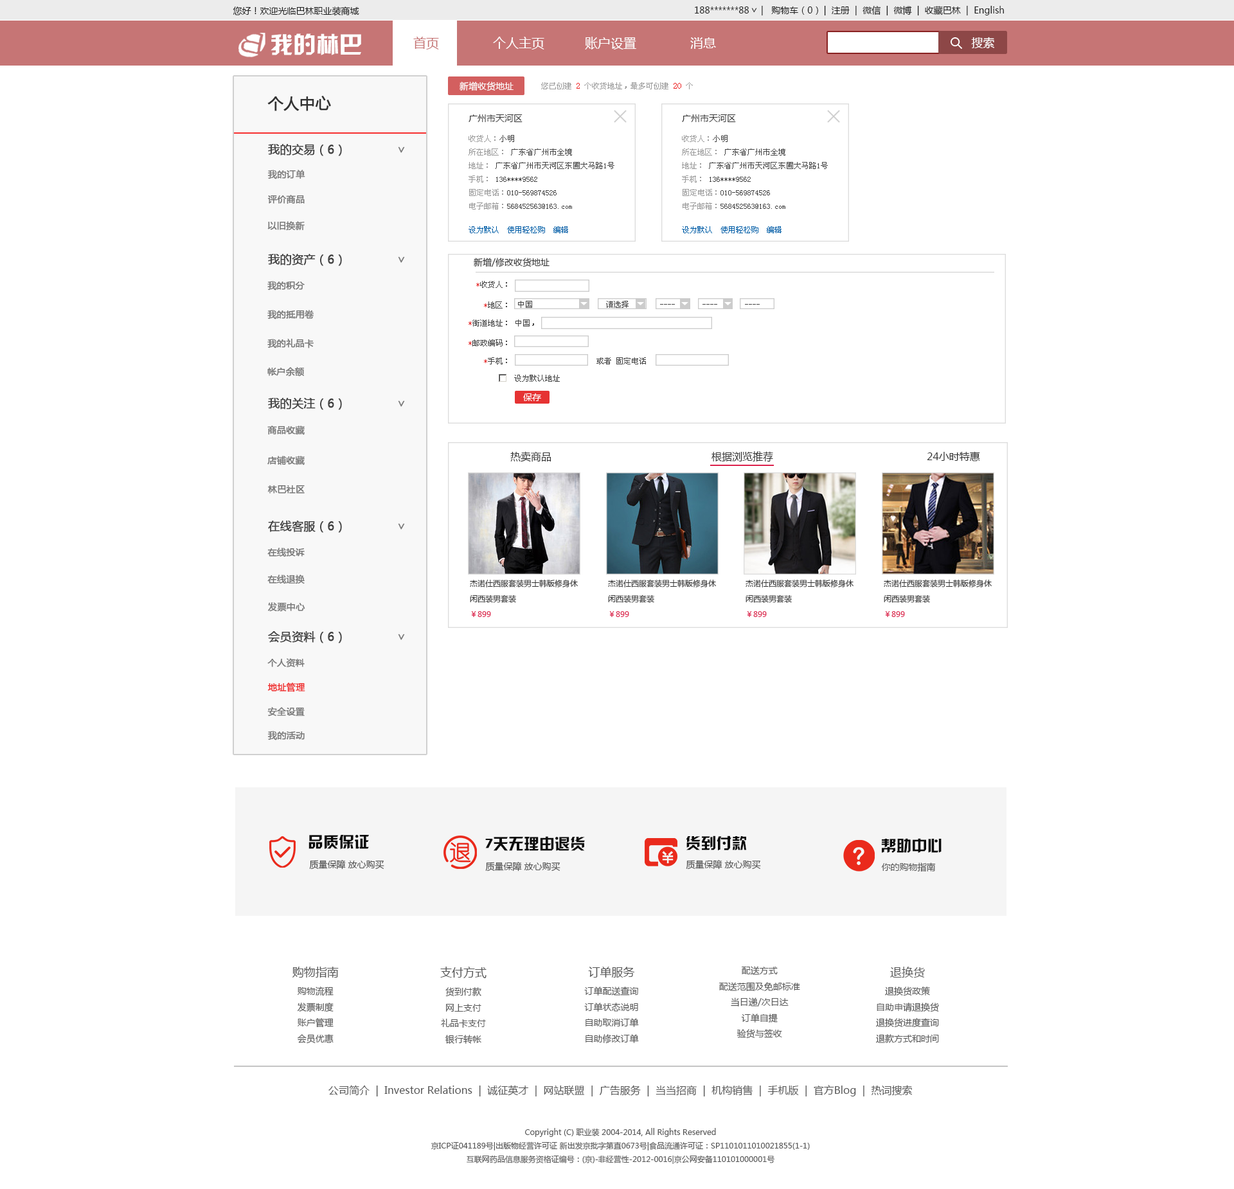
<style>
.page{position:relative;width:1234px;height:1189px;background:#ffffff}
.page>*{position:absolute;margin:0}
.t1{font:9px "MicrosoftYaHei";color:#1e1e1e}
.t2{font:9.2px "MicrosoftYaHei";scale:0.94 1}
.t3{font:23.1px "HYk2gj";color:#ffffff}
.t4{font:12.9px "MicrosoftYaHei";color:#c67575}
.t5{font:12.9px "MicrosoftYaHei";color:#ffffff}
.t6{font:11.6px "MicrosoftYaHei";color:#ffffff}
.t7{font:9px "MicrosoftYaHei";color:#ffffff}
.t8{font:7.7px "SimSun";color:#999999}
.t9{font:9px "SimSun";color:#ee2121}
.t10{font:9px "SimSun";color:#ec1e1e}
.t11{font:15.4px "MicrosoftYaHei";color:#323232;font-weight:bold}
.t12{font:9px "MicrosoftYaHei";color:#333333}
.t13{font:7.7px "SimSun";color:#444444}
.t14{font:11.6px "MicrosoftYaHei";color:#434343;font-weight:bold}
.t15{font:11.6px "MicrosoftYaHei";color:#787878;font-weight:bold}
.t16{font:9px "MicrosoftYaHei";color:#7b7a7a;font-weight:bold}
.t17{font:9px "MicrosoftYaHei";color:#787878;font-weight:bold}
.t18{font:7.7px "SimSun";color:#005ea7}
.t19{font:7.7px "SimSun";color:#e63333}
.t20{font:10.3px "MicrosoftYaHei";color:#333333}
.t21{font:7.7px/15.4px "MicrosoftYaHei";color:#333333}
.t22{font:7.7px/15.4px "MicrosoftYaHei";color:#dc214c}
.t23{font:9px "MicrosoftYaHei";color:#ef2e2e;font-weight:bold}
.t24{font:15.4px "HYk2gj";color:#080808}
.t25{font:15.4px "HYk2gj";color:#0d0d0d}
.t26{font:15.4px "HYk2gj";color:#090909}
.t27{font:15.4px "HYk2gj";color:#0b0b0b}
.t28{font:9px "MicrosoftYaHei";color:#4c4c4c}
.t29{font:9px "MicrosoftYaHei";color:#4e4e4e}
.t30{font:9px "MicrosoftYaHei";color:#505050}
.t31{font:9px "MicrosoftYaHei";color:#575757}
.t32{font:11.6px "MicrosoftYaHei";color:#575757}
.t33{font:10.3px "MicrosoftYaHei";color:#575757}
.t34{font:7.7px "MicrosoftYaHei";color:#575757}
</style>
<div class="page">
<p class="t1" style="left:695px;top:6px;width:309px;height:9px">188*******88                            |  注册  |  微信  |  微博  |  收藏巴林  |  English</p>
<p class="t1" style="left:762px;top:6px;width:56px;height:9px">|   购物车（0）</p>
<p class="t1" style="left:233px;top:6px;width:126px;height:10px">您好！欢迎光临巴林职业装商城</p>
<p class="t2" style="left:752px;top:8px;width:5px;height:5px;rotate:90deg">&gt;</p>
<p class="t3" style="left:271px;top:33px;width:90px;height:22px">我的林巴</p>
<p class="t4" style="left:413px;top:37px;width:26px;height:13px">首页</p>
<p class="t5" style="left:493px;top:37px;width:51px;height:13px">个人主页</p>
<p class="t5" style="left:585px;top:37px;width:51px;height:13px">账户设置</p>
<p class="t5" style="left:690px;top:37px;width:26px;height:12px">消息</p>
<p class="t6" style="left:971px;top:37px;width:24px;height:12px">搜索</p>
<p class="t7" style="left:460px;top:82px;width:54px;height:9px">新增收货地址</p>
<p class="t8" style="left:541px;top:82px;width:152px;height:7px">您已创建 <span class="t9">2 </span>个收货地址，最多可创建 <span class="t10">20 </span>个</p>
<p class="t11" style="left:267px;top:96px;width:64px;height:15px">个人中心</p>
<p class="t12" style="left:469px;top:114px;width:54px;height:8px">广州市天河区</p>
<p class="t12" style="left:682px;top:114px;width:54px;height:8px">广州市天河区</p>
<p class="t13" style="left:469px;top:135px;width:146px;height:75px"><span class="t8">收货人：</span>小明<br><span class="t8">所在地区： </span>广东省广州市全境<br><span class="t8">地址： </span>广东省广州市天河区东圃大马路1号<br><span class="t8">手机：</span> 136****9562<br><span class="t8">固定电话：</span>010-569874526<br><span class="t8">电子邮箱：</span>568452563@163.com</p>
<p class="t13" style="left:682px;top:135px;width:146px;height:75px"><span class="t8">收货人：</span>小明<br><span class="t8">所在地区： </span>广东省广州市全境<br><span class="t8">地址： </span>广东省广州市天河区东圃大马路1号<br><span class="t8">手机：</span> 136****9562<br><span class="t8">固定电话：</span>010-569874526<br><span class="t8">电子邮箱：</span>568452563@163.com</p>
<p class="t14" style="left:268px;top:144px;width:74px;height:12px">我的交易（6）</p>
<p class="t15" style="left:398px;top:147px;width:7px;height:6px;rotate:90deg">&gt;</p>
<p class="t16" style="left:268px;top:170px;width:37px;height:9px">我的订单</p>
<p class="t17" style="left:267px;top:195px;width:38px;height:9px">评价商品</p>
<p class="t17" style="left:267px;top:221px;width:38px;height:10px">以旧换新</p>
<p class="t18" style="left:469px;top:226px;width:99px;height:7px">设为默认  使用轻松购  编辑</p>
<p class="t18" style="left:682px;top:226px;width:100px;height:7px">设为默认  使用轻松购  编辑</p>
<p class="t14" style="left:268px;top:254px;width:74px;height:12px">我的资产（6）</p>
<p class="t15" style="left:398px;top:256px;width:7px;height:7px;rotate:90deg">&gt;</p>
<p class="t12" style="left:474px;top:258px;width:76px;height:9px">新增/修改收货地址</p>
<p class="t17" style="left:267px;top:281px;width:38px;height:10px">我的积分</p>
<p class="t13" style="left:476px;top:281px;width:31px;height:7px"><span class="t19">*</span>收货人：</p>
<p class="t13" style="left:484px;top:302px;width:23px;height:7px"><span class="t19">*</span>地区：</p>
<p class="t13" style="left:518px;top:301px;width:242px;height:7px">中国                   请选择        ----       ----       ----</p>
<p class="t17" style="left:267px;top:310px;width:47px;height:10px">我的抵用卷</p>
<p class="t13" style="left:469px;top:320px;width:38px;height:7px"><span class="t19">*</span>街道地址：</p>
<p class="t13" style="left:516px;top:320px;width:18px;height:7px">中国，</p>
<p class="t17" style="left:267px;top:339px;width:47px;height:9px">我的礼品卡</p>
<p class="t13" style="left:469px;top:339px;width:38px;height:7px"><span class="t19">*</span>邮政编码：</p>
<p class="t13" style="left:484px;top:357px;width:23px;height:7px"><span class="t19">*</span>手机：</p>
<p class="t13" style="left:597px;top:357px;width:49px;height:7px">或者 固定电话</p>
<p class="t17" style="left:267px;top:367px;width:37px;height:10px">帐户余额</p>
<p class="t13" style="left:514px;top:375px;width:46px;height:7px">设为默认地址</p>
<p class="t14" style="left:268px;top:398px;width:74px;height:12px">我的关注（6）</p>
<p class="t15" style="left:398px;top:401px;width:7px;height:6px;rotate:90deg">&gt;</p>
<p class="t7" style="left:523px;top:393px;width:18px;height:8px">保存</p>
<p class="t17" style="left:267px;top:426px;width:38px;height:9px">商品收藏</p>
<p class="t17" style="left:267px;top:456px;width:38px;height:9px">店铺收藏</p>
<p class="t20" style="left:510px;top:451px;width:42px;height:11px">热卖商品</p>
<p class="t20" style="left:712px;top:451px;width:61px;height:11px">根据浏览推荐</p>
<p class="t20" style="left:927px;top:451px;width:53px;height:11px">24小时特惠</p>
<p class="t17" style="left:267px;top:485px;width:38px;height:9px">林巴社区</p>
<p class="t14" style="left:268px;top:520px;width:74px;height:13px">在线客服（6）</p>
<p class="t15" style="left:398px;top:523px;width:7px;height:7px;rotate:90deg">&gt;</p>
<p class="t17" style="left:267px;top:548px;width:38px;height:9px">在线投诉</p>
<p class="t17" style="left:267px;top:575px;width:38px;height:9px">在线退换</p>
<p class="t21" style="left:470px;top:579px;width:109px;height:38px">杰诺仕西服套装男士韩版修身休<br>闲西装男套装<br><span class="t22">￥899</span></p>
<p class="t21" style="left:608px;top:579px;width:109px;height:38px">杰诺仕西服套装男士韩版修身休<br>闲西装男套装<br><span class="t22">￥899</span></p>
<p class="t21" style="left:746px;top:579px;width:108px;height:38px">杰诺仕西服套装男士韩版修身休<br>闲西装男套装<br><span class="t22">￥899</span></p>
<p class="t21" style="left:884px;top:579px;width:109px;height:38px">杰诺仕西服套装男士韩版修身休<br>闲西装男套装<br><span class="t22">￥899</span></p>
<p class="t17" style="left:268px;top:602px;width:37px;height:10px">发票中心</p>
<p class="t14" style="left:268px;top:631px;width:74px;height:13px">会员资料（6）</p>
<p class="t15" style="left:398px;top:634px;width:7px;height:6px;rotate:90deg">&gt;</p>
<p class="t17" style="left:267px;top:658px;width:38px;height:9px">个人资料</p>
<p class="t23" style="left:267px;top:683px;width:38px;height:9px">地址管理</p>
<p class="t17" style="left:267px;top:707px;width:38px;height:10px">安全设置</p>
<p class="t17" style="left:268px;top:731px;width:37px;height:10px">我的活动</p>
<p class="t24" style="left:309px;top:835px;width:60px;height:15px">品质保证</p>
<p class="t25" style="left:485px;top:836px;width:100px;height:15px">7天无理由退货</p>
<p class="t26" style="left:686px;top:836px;width:60px;height:15px">货到付款</p>
<p class="t27" style="left:881px;top:838px;width:61px;height:15px">帮助中心</p>
<p class="t28" style="left:309px;top:860px;width:75px;height:10px">质量保障 放心购买</p>
<p class="t29" style="left:485px;top:862px;width:76px;height:10px">质量保障 放心购买</p>
<p class="t30" style="left:686px;top:860px;width:75px;height:10px">质量保障 放心购买</p>
<p class="t31" style="left:881px;top:863px;width:55px;height:9px">你的购物指南</p>
<p class="t31" style="left:292px;top:967px;width:47px;height:77px;text-align:center"><span class="t32">购物指南<br></span>购物流程<br>发票制度<br>账户管理<br>会员优惠</p>
<p class="t31" style="left:440px;top:967px;width:47px;height:77px;text-align:center"><span class="t32">支付方式<br></span>货到付款<br>网上支付<br>礼品卡支付<br>银行转帐</p>
<p class="t31" style="left:584px;top:967px;width:55px;height:77px;text-align:center"><span class="t32">订单服务<br></span>订单配送查询<br>订单状态说明<br>自助取消订单<br>自助修改订单</p>
<p class="t31" style="left:719px;top:966px;width:81px;height:73px;text-align:center">配送方式<br>配送范围及免邮标准<br>当日递/次日达<br>订单自提<br>验货与签收</p>
<p class="t31" style="left:876px;top:967px;width:63px;height:76px;text-align:center"><span class="t32">退换货<br></span>退换货政策<br>自助申请退换货<br>退换货进度查询<br>退款方式和时间</p>
<p class="t33" style="left:328px;top:1085px;width:584px;height:12px">公司简介  |  Investor Relations  |  诚征英才  |  网站联盟  |  广告服务  |  当当招商  |  机构销售  |  手机版  |  官方Blog  |  热词搜索</p>
<p class="t34" style="left:431px;top:1128px;width:379px;height:36px;text-align:center">Copyright (C) 职业装 2004-2014, All Rights Reserved<br>京ICP证041189号|出版物经营许可证 新出发京批字第直0673号|食品流通许可证：SP1101011010021855(1-1)<br>互联网药品信息服务资格证编号：(京)-非经营性-2012-0016|京公网安备110101000001号</p>
</div>
